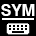
<style>
.page{position:relative;width:36px;height:36px;background:#000000}
.page>*{position:absolute;margin:0}
.t1{font:16px "Swiss721BT-Bold";color:#ffffff}
</style>
<div class="page">
<p class="t1" style="left:1px;top:4px;width:34px;height:12px">SYM</p>
</div>
